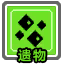
<style>
.page{position:relative;width:64px;height:64px;background:#ffffff}
.page>*{position:absolute;margin:0}
.t1{font:13.3px "FZLTHProGlobal-Demibold";letter-spacing:0.06em;color:#6ee224;scale:1.05 1}
</style>
<div class="page">
<p class="t1" style="left:18px;top:49px;width:28px;height:13px">遗物</p>
</div>
